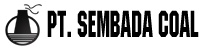
<style>
.page{position:relative;width:200px;height:50px;background:#ffffff}
.page>*{position:absolute;margin:0}
.t1{font:37.2px "MachineITCbyBT-Regular";color:#000000;scale:0.62 1}
</style>
<div class="page">
<p class="t1" style="left:47px;top:10px;width:152px;height:27px">pt. sembada coal</p>
</div>
